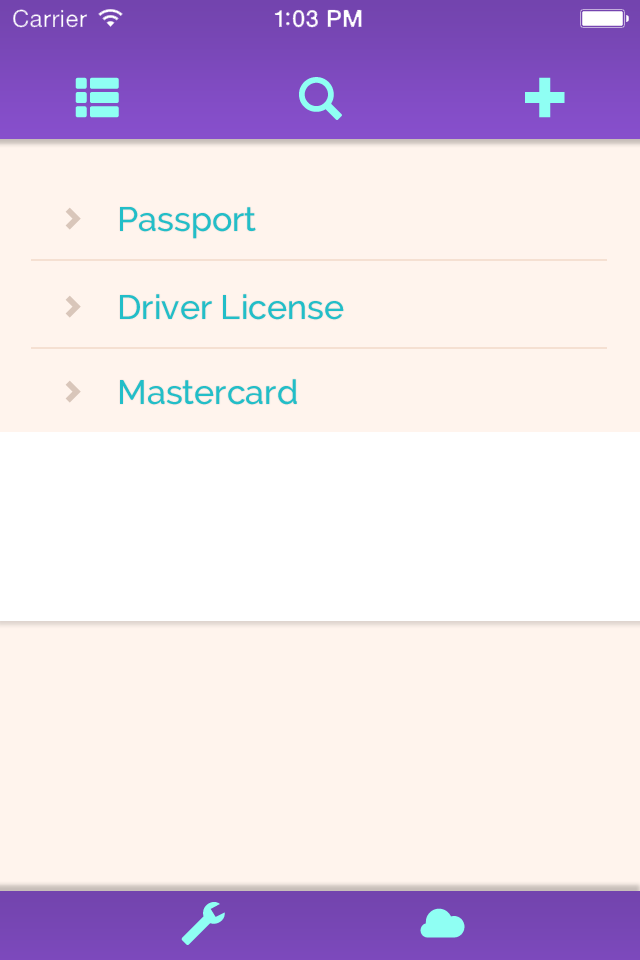
<style>
.page{position:relative;width:640px;height:960px;background:#fff4ed}
.page>*{position:absolute;margin:0}
.t1{font:34px "Raleway-Medium";color:#22bec8}
</style>
<div class="page">
<p class="t1" style="left:120px;top:207px;width:136px;height:32px">Passport</p>
<p class="t1" style="left:120px;top:294px;width:224px;height:26px">Driver License</p>
<p class="t1" style="left:120px;top:379px;width:177px;height:26px">Mastercard</p>
</div>
